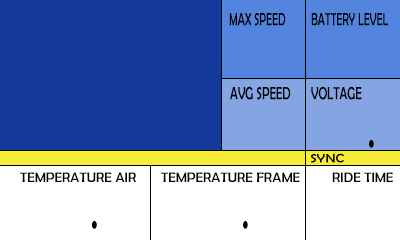
<style>
.page{position:relative;width:400px;height:240px;background:#13399b}
.page>*{position:absolute;margin:0}
.t1{font:18px "BerlinSansFB-Reg";color:#000000;scale:0.61 1}
.t2{font:18px "BerlinSansFB-Reg";color:#000000;scale:0.66 1}
.t3{font:48px "BerlinSansFB-Reg";color:#000000;scale:0.66 1}
.t4{font:12.4px "BerlinSansFB-Reg";color:#000000;scale:1.16 1}
.t5{font:14px "BerlinSansFB-Reg";color:#000000}
</style>
<div class="page">
<p class="t1" style="left:229px;top:13px;width:57px;height:13px">MAX SPEED</p>
<p class="t1" style="left:311px;top:13px;width:77px;height:13px">BATTERY LEVEL</p>
<p class="t2" style="left:230px;top:86px;width:61px;height:14px">AVG SPEED</p>
<p class="t2" style="left:311px;top:86px;width:51px;height:14px">VOLTAGE</p>
<p class="t3" style="left:369px;top:140px;width:5px;height:8px">.</p>
<p class="t4" style="left:311px;top:153px;width:33px;height:10px">SYNC</p>
<p class="t5" style="left:20px;top:172px;width:116px;height:10px">TEMPERATURE AIR</p>
<p class="t5" style="left:161px;top:172px;width:139px;height:10px">TEMPERATURE FRAME</p>
<p class="t5" style="left:332px;top:172px;width:61px;height:10px">RIDE TIME</p>
<p class="t3" style="left:243px;top:221px;width:5px;height:8px">.</p>
</div>
